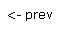
<style>
.page{position:relative;width:63px;height:32px;background:#ffffff}
.page>*{position:absolute;margin:0}
.t1{font:12px "Verdana";color:#000000}
</style>
<div class="page">
<p class="t1" style="left:8px;top:12px;width:44px;height:9px">&lt;- prev</p>
</div>
